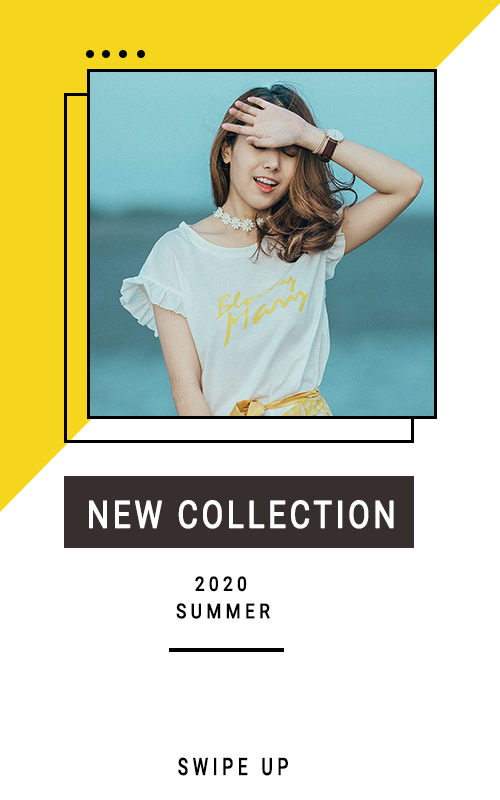
<style>
.page{position:relative;width:500px;height:800px;background:#ffffff}
.page>*{position:absolute;margin:0}
.t1{font:37.5px "Roboto-Regular";letter-spacing:0.1em;color:#ffffff;text-transform:uppercase;font-weight:bold;scale:0.83 1}
.t2{font:19.4px "Roboto-Regular";letter-spacing:0.24em;color:#000000;text-transform:uppercase;font-weight:bold;scale:0.88 1}
.t3{font:20.2px "Roboto-Regular";letter-spacing:0.24em;color:#000000;text-transform:uppercase;font-weight:bold;scale:0.84 1}
.t4{font:23.6px "Roboto-Regular";letter-spacing:0.26em;color:#000000;text-transform:uppercase;font-weight:bold;scale:0.72 1}
</style>
<div class="page">
<p class="t1" style="left:89px;top:500px;width:305px;height:29px">NEW COLLECTION</p>
<p class="t2" style="left:195px;top:576px;width:52px;height:16px">2020</p>
<p class="t3" style="left:176px;top:603px;width:94px;height:16px">SUMMER</p>
<p class="t4" style="left:178px;top:757px;width:110px;height:19px">swipe up</p>
</div>
